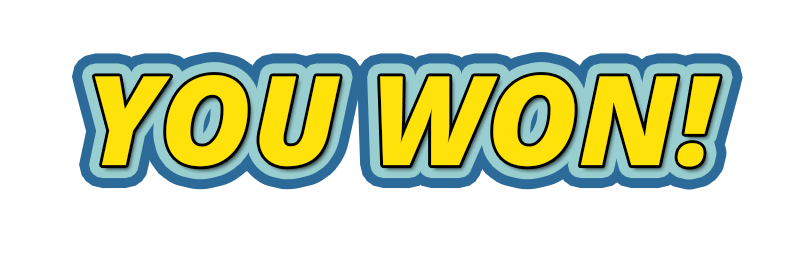
<style>
.page{position:relative;width:800px;height:266px;background:#ffffff}
.page>*{position:absolute;margin:0}
.t1{font:124.4px "OpenSans-ExtraboldItalic";color:#ffe20a}
</style>
<div class="page">
<p class="t1" style="left:94px;top:75px;width:626px;height:92px">YOU WON!</p>
<p class="t1" style="left:94px;top:75px;width:626px;height:92px">YOU WON!</p>
<p class="t1" style="left:94px;top:75px;width:626px;height:92px">YOU WON!</p>
<p class="t1" style="left:94px;top:75px;width:626px;height:92px">YOU WON!</p>
</div>
